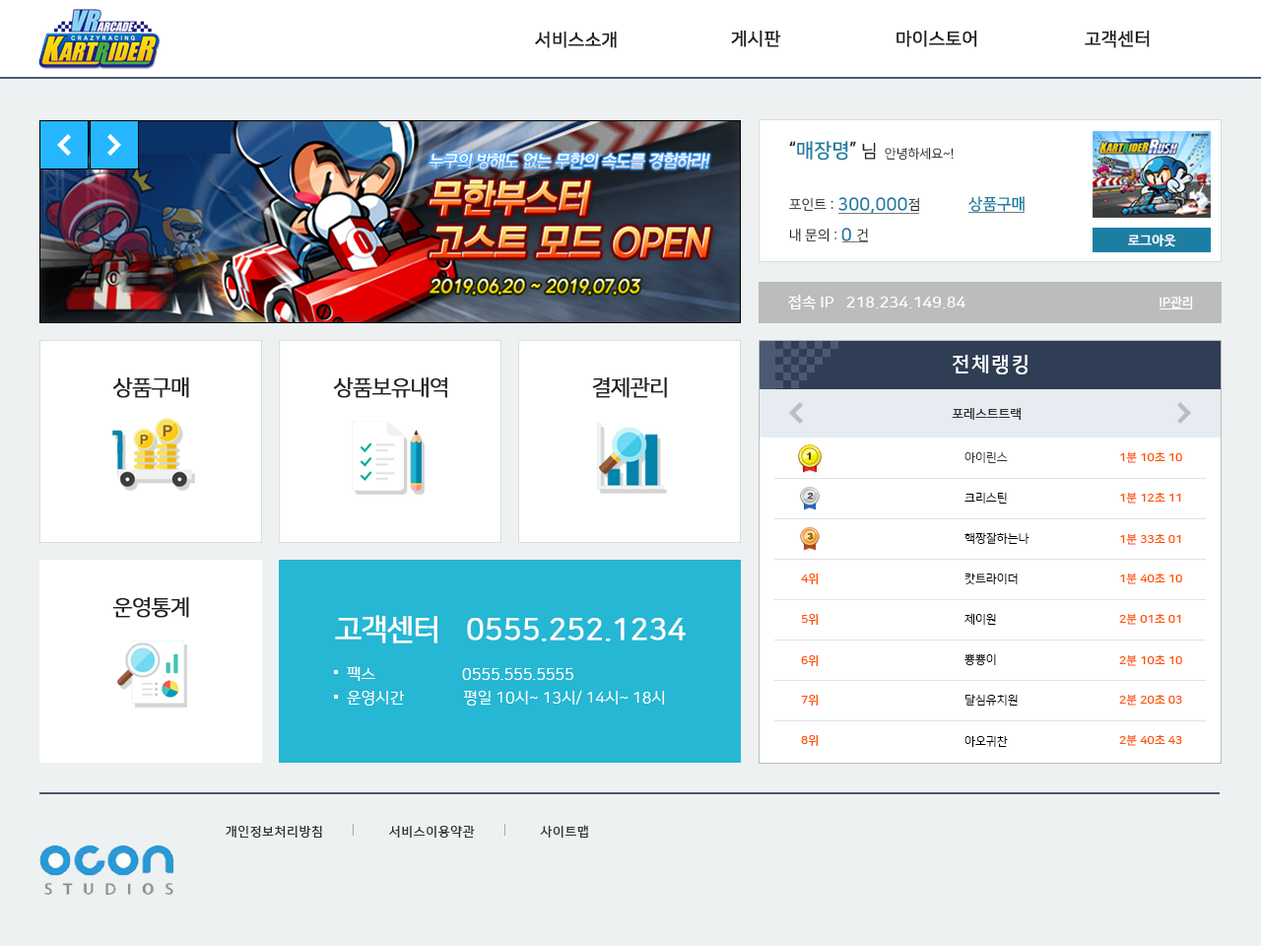
<style>
.page{position:relative;width:1261px;height:946px;background:#ffffff}
.page>*{position:absolute;margin:0}
.t1{font:17.7px "NanumSquareR";color:#222222;font-weight:bold}
.t2{font:19.7px "NanumSquareB";color:#1d7ea3}
.t3{font:19.7px "NanumSquareB";color:#222222}
.t4{font:17.7px "NanumSquareR";color:#222222}
.t5{font:12.8px "NanumSquareR";color:#222222}
.t6{font:17.7px "NanumSquareB";color:#1d7ea3}
.t7{font:13.8px "NanumSquareR";color:#222222}
.t8{font:15.8px "NanumSquareB";color:#1d7ea3}
.t9{font:12.8px "NanumSquareR";color:#ffffff;font-weight:bold}
.t10{font:15.8px "NanumSquareB";color:#ffffff}
.t11{font:12.8px "NanumSquareB";color:#ffffff}
.t12{font:19.7px "NanumSquareB";letter-spacing:0.1em;color:#ffffff}
.t13{font:21.7px "NanumSquareR";letter-spacing:-0.05em;color:#222222;font-weight:bold}
.t14{font:12.8px "NanumSquareB";color:#333333}
.t15{font:11.8px "NanumSquareR";color:#333333}
.t16{font:11.8px "NanumSquareB";color:#ff5400}
.t17{font:11.8px "NanumSquareR";color:#000000}
.t18{font:29.6px "NanumSquareR";color:#ffffff;font-weight:bold}
.t19{font:29.6px "NanumSquareR";letter-spacing:-0.05em;color:#ffffff;font-weight:bold}
.t20{font:15.8px "NanumSquareR";color:#ffffff}
.t21{font:12.8px "NanumSquareB";letter-spacing:0.05em;color:#333333}
</style>
<div class="page">
<p class="t1" style="left:535px;top:32px;width:82px;height:16px">서비스소개</p>
<p class="t1" style="left:731px;top:31px;width:50px;height:16px">게시판</p>
<p class="t1" style="left:896px;top:31px;width:81px;height:16px">마이스토어</p>
<p class="t1" style="left:1085px;top:31px;width:65px;height:17px">고객센터</p>
<p class="t2" style="left:789px;top:141px;width:87px;height:20px"><span class="t3">“</span>매장명<span class="t3">” </span><span class="t4">님</span></p>
<p class="t5" style="left:885px;top:147px;width:69px;height:14px">안녕하세요~!</p>
<p class="t6" style="left:789px;top:197px;width:130px;height:17px"><span class="t7">포인트 : </span>300,000<span class="t7">점</span></p>
<p class="t8" style="left:968px;top:196px;width:56px;height:16px">상품구매</p>
<p class="t7" style="left:789px;top:228px;width:79px;height:14px">내 문의 : <span class="t6">0 </span>건</p>
<p class="t9" style="left:1128px;top:233px;width:48px;height:14px">로그아웃</p>
<p class="t10" style="left:788px;top:295px;width:177px;height:14px">접속 IP   218.234.149.84</p>
<p class="t11" style="left:1159px;top:296px;width:34px;height:12px">IP관리</p>
<p class="t12" style="left:953px;top:355px;width:74px;height:19px">전체랭킹</p>
<p class="t13" style="left:112px;top:377px;width:77px;height:21px">상품구매</p>
<p class="t13" style="left:333px;top:377px;width:114px;height:21px">상품보유내역</p>
<p class="t13" style="left:592px;top:377px;width:75px;height:21px">결제관리</p>
<p class="t14" style="left:952px;top:408px;width:69px;height:12px">포레스트트랙</p>
<p class="t15" style="left:964px;top:452px;width:44px;height:11px">아이린스</p>
<p class="t16" style="left:1120px;top:451px;width:62px;height:12px">1분 10초 10</p>
<p class="t17" style="left:964px;top:493px;width:43px;height:10px">크리스틴</p>
<p class="t16" style="left:1120px;top:492px;width:61px;height:11px">1분 12초 11</p>
<p class="t17" style="left:964px;top:532px;width:65px;height:12px">핵짱잘하는나</p>
<p class="t16" style="left:1120px;top:533px;width:61px;height:12px">1분 33초 01</p>
<p class="t16" style="left:801px;top:573px;width:17px;height:11px">4위</p>
<p class="t17" style="left:964px;top:573px;width:54px;height:11px">캇트라이더</p>
<p class="t16" style="left:1120px;top:572px;width:62px;height:12px">1분 40초 10</p>
<p class="t13" style="left:112px;top:597px;width:77px;height:21px">운영통계</p>
<p class="t18" style="left:335px;top:615px;width:351px;height:28px"><span class="t19">고객센터    </span>0555.252.1234</p>
<p class="t16" style="left:801px;top:614px;width:17px;height:11px">5위</p>
<p class="t17" style="left:964px;top:613px;width:32px;height:12px">제이원</p>
<p class="t16" style="left:1119px;top:613px;width:62px;height:12px">2분 01초 01</p>
<p class="t17" style="left:964px;top:653px;width:32px;height:13px">뿅뿅이</p>
<p class="t20" style="left:347px;top:666px;width:226px;height:15px">팩스                      0555.555.5555</p>
<p class="t16" style="left:801px;top:655px;width:17px;height:11px">6위</p>
<p class="t16" style="left:1119px;top:654px;width:63px;height:12px">2분 10초 10</p>
<p class="t20" style="left:347px;top:691px;width:317px;height:14px">운영시간               평일 10시~ 13시/ 14시~ 18시</p>
<p class="t16" style="left:801px;top:694px;width:17px;height:11px">7위</p>
<p class="t17" style="left:964px;top:694px;width:54px;height:11px">달심유치원</p>
<p class="t16" style="left:1119px;top:694px;width:63px;height:11px">2분 20초 03</p>
<p class="t16" style="left:801px;top:735px;width:17px;height:11px">8위</p>
<p class="t17" style="left:964px;top:736px;width:44px;height:11px">아오귀찬</p>
<p class="t16" style="left:1119px;top:734px;width:63px;height:12px">2분 40초 43</p>
<p class="t21" style="left:226px;top:825px;width:362px;height:12px">개인정보처리방침                 서비스이용약관                 사이트맵</p>
</div>
